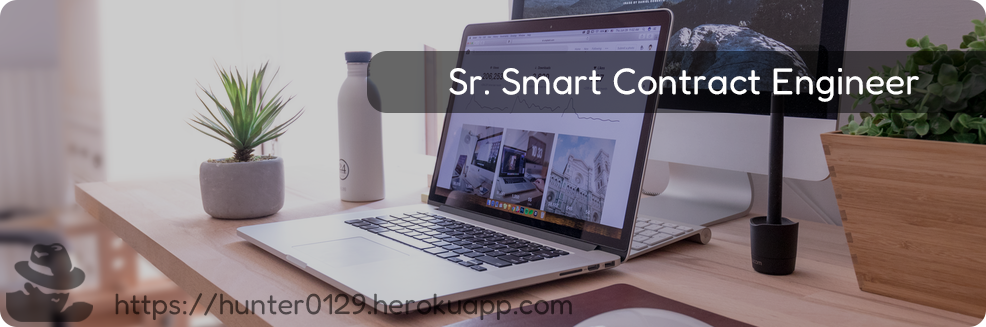
<style>
.page{position:relative;width:986px;height:327px}
.page>*{position:absolute;margin:0}
.t1{font:37.2px "Fredoka-Regular";color:#ffffff}
.t2{font:29.2px "Fredoka-Regular"}
</style>
<div class="page">
<p class="t1" style="left:449px;top:68px;width:470px;height:34px">Sr. Smart Contract Engineer</p>
<p class="t2" style="left:115px;top:293px;width:457px;height:28px">https://hunter0129.herokuapp.com</p>
</div>
